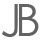
<style>
.page{position:relative;width:40px;height:40px;background:#ffffff}
.page>*{position:absolute;margin:0}
.t1{font:45px "CenturyGothic";letter-spacing:-0.16em;color:#636363}
</style>
<div class="page">
<p class="t1" style="left:2px;top:4px;width:37px;height:33px">JB</p>
</div>
